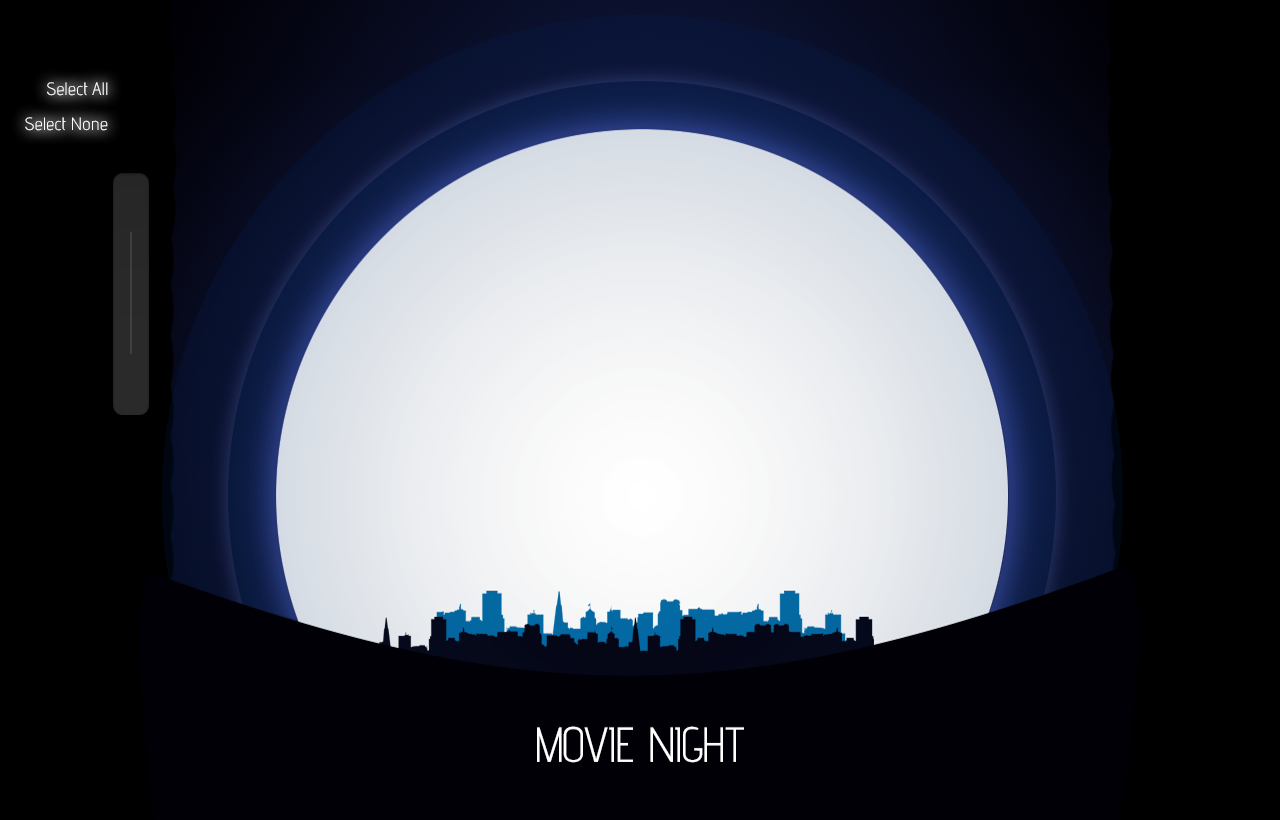
<style>
.page{position:relative;width:1280px;height:820px;background:#000000}
.page>*{position:absolute;margin:0}
.t1{font:18px "advent-Regular";color:#ffffff}
</style>
<div class="page">
<p class="t1" style="left:47px;top:82px;width:61px;height:14px">Select All</p>
<p class="t1" style="left:25px;top:117px;width:83px;height:14px">Select None</p>
</div>
